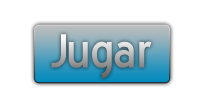
<style>
.page{position:relative;width:200px;height:100px;background:#ffffff}
.page>*{position:absolute;margin:0}
.t1{font:60px "BlueHighway"}
</style>
<div class="page">
<p class="t1" style="left:51px;top:34px;width:101px;height:45px">Jugar</p>
</div>
